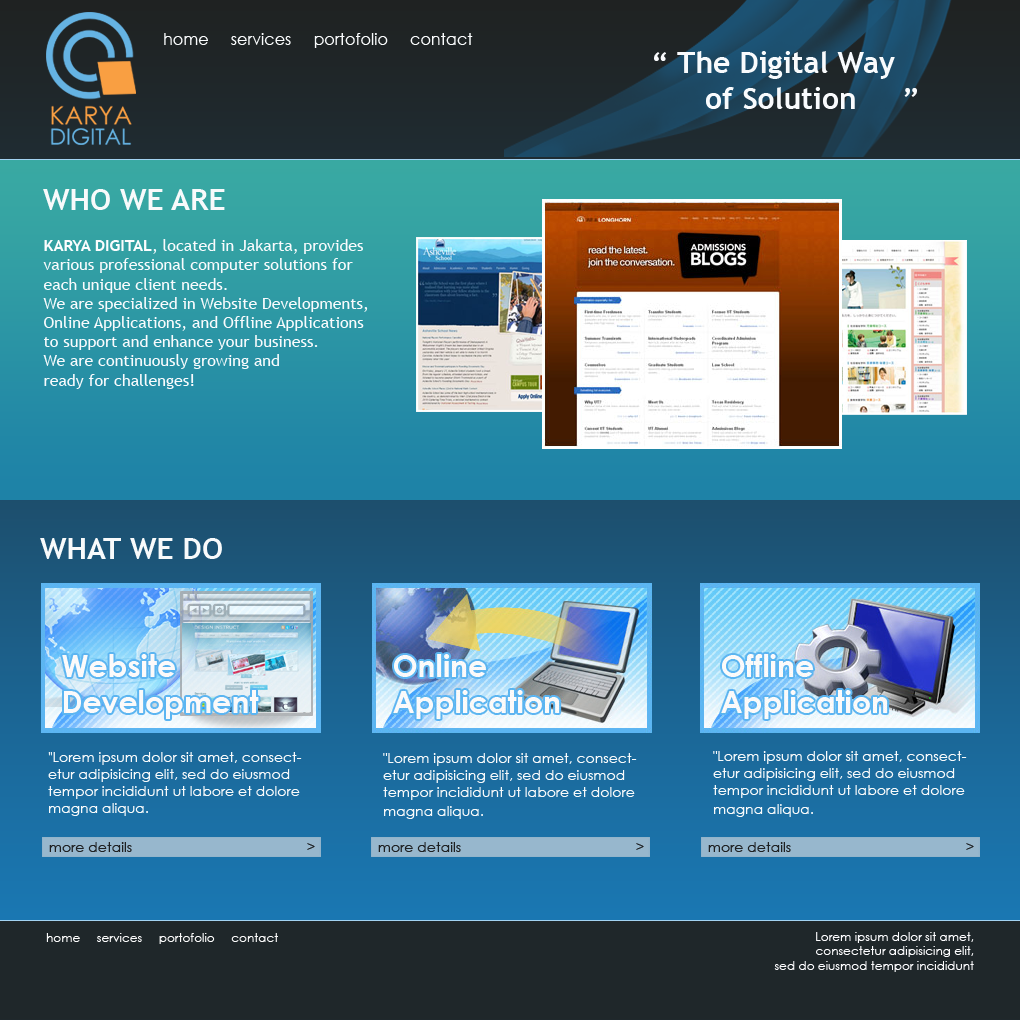
<style>
.page{position:relative;width:1020px;height:1020px}
.page>*{position:absolute;margin:0}
.t1{font:16px "CenturyGothic";color:#f9fbfd}
.t2{font:30px "TrebuchetMS-Bold";color:#f9fbfd}
.t3{font:30px "TrebuchetMS-Bold";color:#f8fafb}
.t4{font:16px "TrebuchetMS";color:#f9fbfd}
.t5{font:16px "TrebuchetMS-Bold";color:#fcfdfe}
.t6{font:14px "CenturyGothic";color:#f8fafb}
.t7{font:14px "ChaparralPro-Regular";color:#f8fafb}
.t8{font:12px "CenturyGothic";color:#fbfbfb}
.t9{font:12px "CenturyGothic";color:#fcfcfe}
</style>
<div class="page">
<p class="t1" style="left:164px;top:33px;width:309px;height:15px">home     services     portofolio     contact</p>
<p class="t2" style="left:654px;top:51px;width:263px;height:58px">“ The Digital Way<br>      of Solution     ”</p>
<p class="t3" style="left:43px;top:189px;width:182px;height:21px">WHO WE ARE</p>
<p class="t4" style="left:43px;top:239px;width:325px;height:150px"><span class="t5">KARYA DIGITAL</span>, located in Jakarta, provides various professional computer solutions for each unique client needs. <br>We are specialized in Website Developments, Online Applications, and Offline Applications to support and enhance your business. <br>We are continuously growing and<br>ready for challenges!</p>
<p class="t3" style="left:40px;top:538px;width:182px;height:21px">WHAT WE DO</p>
<p class="t6" style="left:48px;top:752px;width:254px;height:64px"><span class="t7">"</span>Lorem ipsum dolor sit amet, consectetur adipisicing elit, sed do eiusmod tempor incididunt ut labore et dolore magna aliqua.</p>
<p class="t6" style="left:383px;top:753px;width:254px;height:66px">"Lorem ipsum dolor sit amet, consectetur adipisicing elit, sed do eiusmod tempor incididunt ut labore et dolore magna aliqua.</p>
<p class="t6" style="left:713px;top:751px;width:254px;height:66px">"Lorem ipsum dolor sit amet, consectetur adipisicing elit, sed do eiusmod tempor incididunt ut labore et dolore magna aliqua.</p>
<p class="t8" style="left:46px;top:933px;width:232px;height:11px">home     services     portofolio     contact</p>
<p class="t9" style="left:774px;top:932px;width:200px;height:40px;text-align:right">Lorem ipsum dolor sit amet, <br>consectetur adipisicing elit, <br>sed do eiusmod tempor incididunt</p>
</div>
